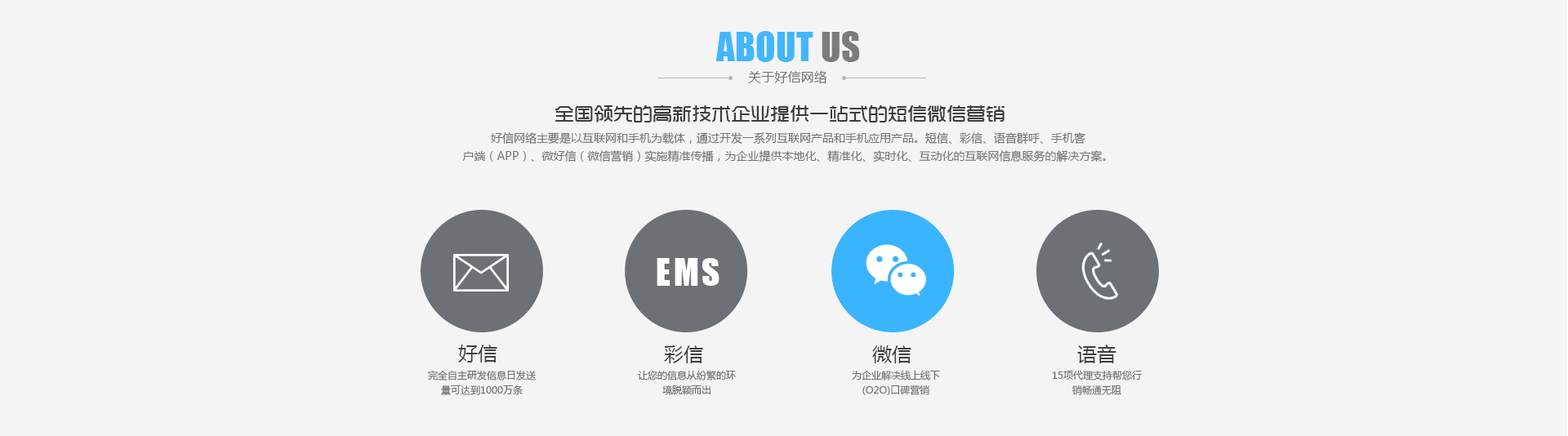
<style>
.page{position:relative;width:1568px;height:436px;background:#f4f4f4}
.page>*{position:absolute;margin:0}
.t1{font:36.8px "Impact";letter-spacing:0.01em;color:#3ab4ff}
.t2{font:36.8px "Impact";letter-spacing:0.01em;color:#777777}
.t3{font:13.1px "MicrosoftYaHei";letter-spacing:0.01em;color:#727272}
.t4{font:19.6px "TRENDS";color:#3c3c3c}
.t5{font:11.4px/18px "MicrosoftYaHei";color:#747474}
.t6{font:34.8px "Impact";letter-spacing:0.1em;color:#ffffff}
.t7{font:19.6px "MicrosoftYaHei";color:#3f3f3f}
.t8{font:9.8px/14.7px "MicrosoftYaHei";color:#6e6e6e}
</style>
<div class="page">
<p class="t1" style="left:715px;top:31px;width:145px;height:31px;opacity:0.97">ABOUT <span class="t2">US</span></p>
<p class="t3" style="left:748px;top:70px;width:79px;height:14px">关于好信网络</p>
<p class="t4" style="left:555px;top:105px;width:449px;height:17px">全国领先的高新技术企业提供一站式的短信微信营销</p>
<p class="t5" style="left:462px;top:132px;width:644px;height:31px;text-align:center">好信网络主要是以互联网和手机为载体，通过开发一系列互联网产品和手机应用产品。短信、彩信、语音群呼、手机客<br>户端（APP）、微好信（微信营销）实施精准传播，为企业提供本地化、精准化、实时化、互动化的互联网信息服务的解决方案。</p>
<p class="t6" style="left:657px;top:258px;width:62px;height:28px">EMS</p>
<p class="t7" style="left:458px;top:345px;width:39px;height:18px">好信</p>
<p class="t7" style="left:664px;top:345px;width:39px;height:18px">彩信</p>
<p class="t7" style="left:872px;top:345px;width:39px;height:18px">微信</p>
<p class="t7" style="left:1077px;top:345px;width:39px;height:18px">语音</p>
<p class="t8" style="left:428px;top:370px;width:108px;height:25px;text-align:center">完全自主研发信息日发送<br>量可达到1000万条</p>
<p class="t8" style="left:638px;top:370px;width:98px;height:25px;text-align:center">让您的信息从纷繁的环<br>境脱颖而出</p>
<p class="t8" style="left:852px;top:370px;width:88px;height:25px;text-align:center">为企业解决线上线下<br>(O2O)口碑营销</p>
<p class="t8" style="left:1052px;top:370px;width:90px;height:25px;text-align:center">15项代理支持帮您行<br>销畅通无阻</p>
</div>
